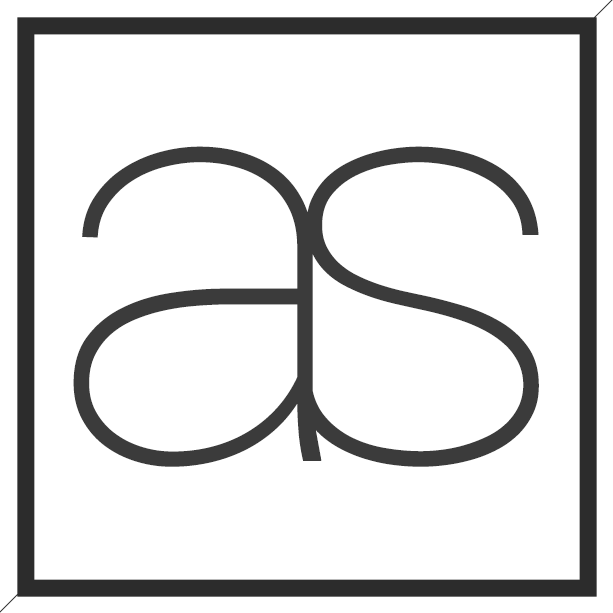
<style>
.page{position:relative;width:613px;height:613px;background:#ffffff}
.page>*{position:absolute;margin:0}
.t1{font:584px "RobotoMono-Thin";letter-spacing:-0.23em;color:#3b3b3b}
</style>
<div class="page">
<p class="t1" style="left:73px;top:146px;width:466px;height:321px">as</p>
</div>
